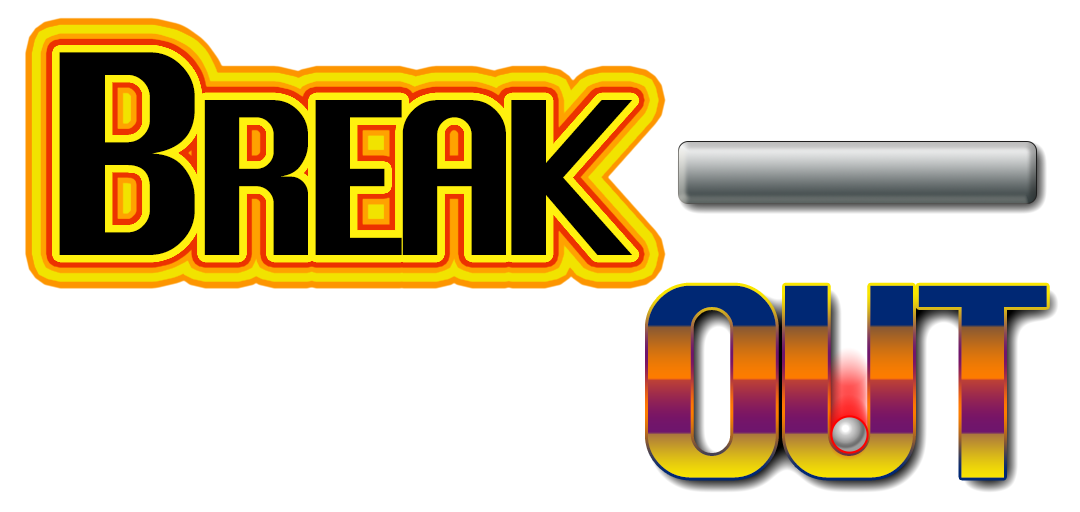
<style>
.page{position:relative;width:1080px;height:512px;background:#ffffff}
.page>*{position:absolute;margin:0}
.t1{font:206.2px "Silom";color:#000000}
.t2{font:270px "Silom";color:#000000}
.t3{font:255.3px "Silom"}
</style>
<div class="page">
<p class="t1" style="left:59px;top:52px;width:573px;height:203px"><span class="t2">B</span>REAK</p>
<p class="t3" style="left:648px;top:285px;width:399px;height:193px">OUT</p>
</div>
